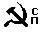
<style>
.page{position:relative;width:48px;height:32px;background:#ffffff}
.page>*{position:absolute;margin:0}
.t1{font:9px/9px "Tahoma-Bold";color:#000000}
</style>
<div class="page">
<p class="t1" style="left:31px;top:8px;width:7px;height:16px;text-align:center">С<br>П</p>
</div>
